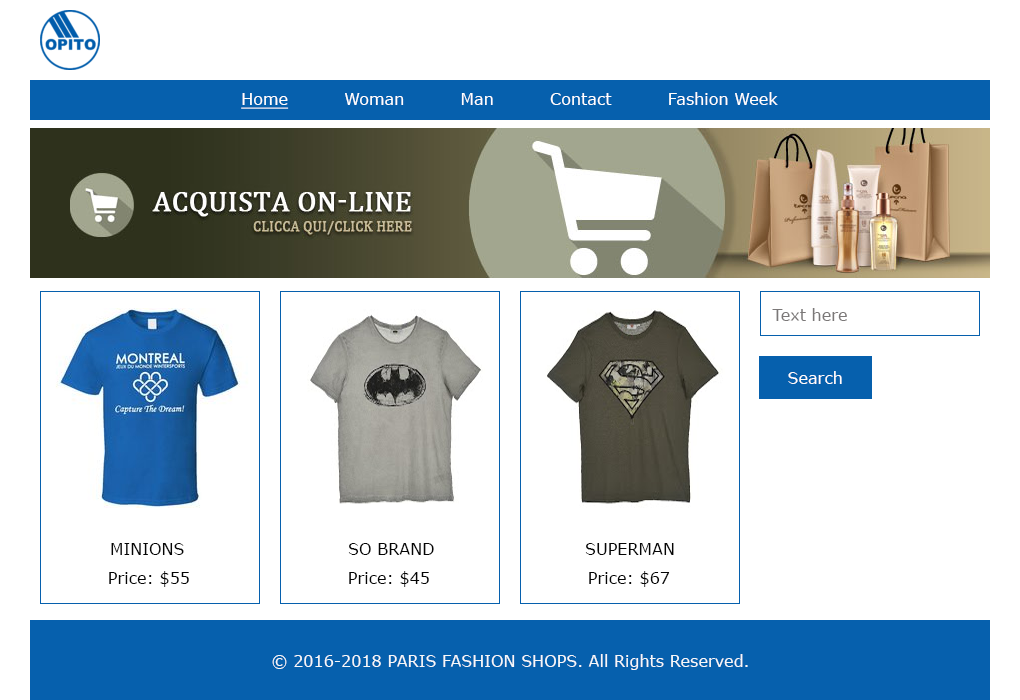
<style>
.page{position:relative;width:1020px;height:700px;background:#ffffff}
.page>*{position:absolute;margin:0}
.t1{font:16px "Verdana";color:#ffffff}
.t2{font:16px "Verdana";color:#ffffff;text-decoration:underline}
.t3{font:16px "Verdana";color:#7b7878}
.t4{font:16px "Verdana";color:#fffdfd}
.t5{font:16px "Verdana";color:#050505}
.t6{font:16px "Verdana";color:#f6f8fa}
</style>
<div class="page">
<p class="t1" style="left:241px;top:92px;width:537px;height:17px"><span class="t2">Home</span>          Woman          Man          Contact          Fashion Week</p>
<p class="t3" style="left:772px;top:308px;width:75px;height:13px">Text here</p>
<p class="t4" style="left:788px;top:371px;width:54px;height:13px">Search</p>
<p class="t5" style="left:111px;top:543px;width:73px;height:12px">MINIONS</p>
<p class="t5" style="left:348px;top:543px;width:86px;height:12px">SO BRAND</p>
<p class="t5" style="left:585px;top:543px;width:89px;height:12px">SUPERMAN</p>
<p class="t5" style="left:109px;top:571px;width:80px;height:16px">Price: $55</p>
<p class="t5" style="left:349px;top:571px;width:80px;height:16px">Price: $45</p>
<p class="t5" style="left:589px;top:571px;width:81px;height:16px">Price: $67</p>
<p class="t6" style="left:272px;top:654px;width:476px;height:16px">© 2016-2018 PARIS FASHION SHOPS. All Rights Reserved.</p>
</div>
